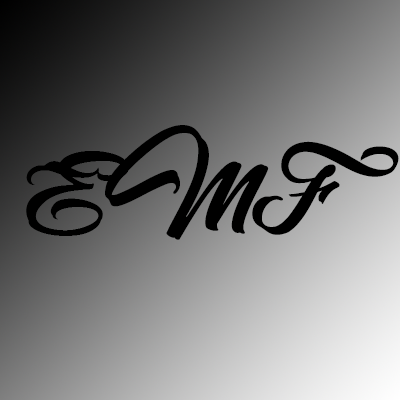
<style>
.page{position:relative;width:400px;height:400px}
.page>*{position:absolute;margin:0}
.t1{font:90px "AltamontePersonalUse";color:#000000}
</style>
<div class="page">
<p class="t1" style="left:26px;top:125px;width:373px;height:115px">EMF</p>
</div>
